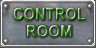
<style>
.page{position:relative;width:96px;height:48px}
.page>*{position:absolute;margin:0}
.t1{font:16.9px "Arial-BoldMT";scale:0.87 1}
.t2{font:16.5px "Arial-BoldMT";scale:0.91 1}
</style>
<div class="page">
<p class="t1" style="left:13px;top:7px;width:73px;height:14px">CONTROL</p>
<p class="t2" style="left:27px;top:25px;width:45px;height:13px">ROOM</p>
</div>
